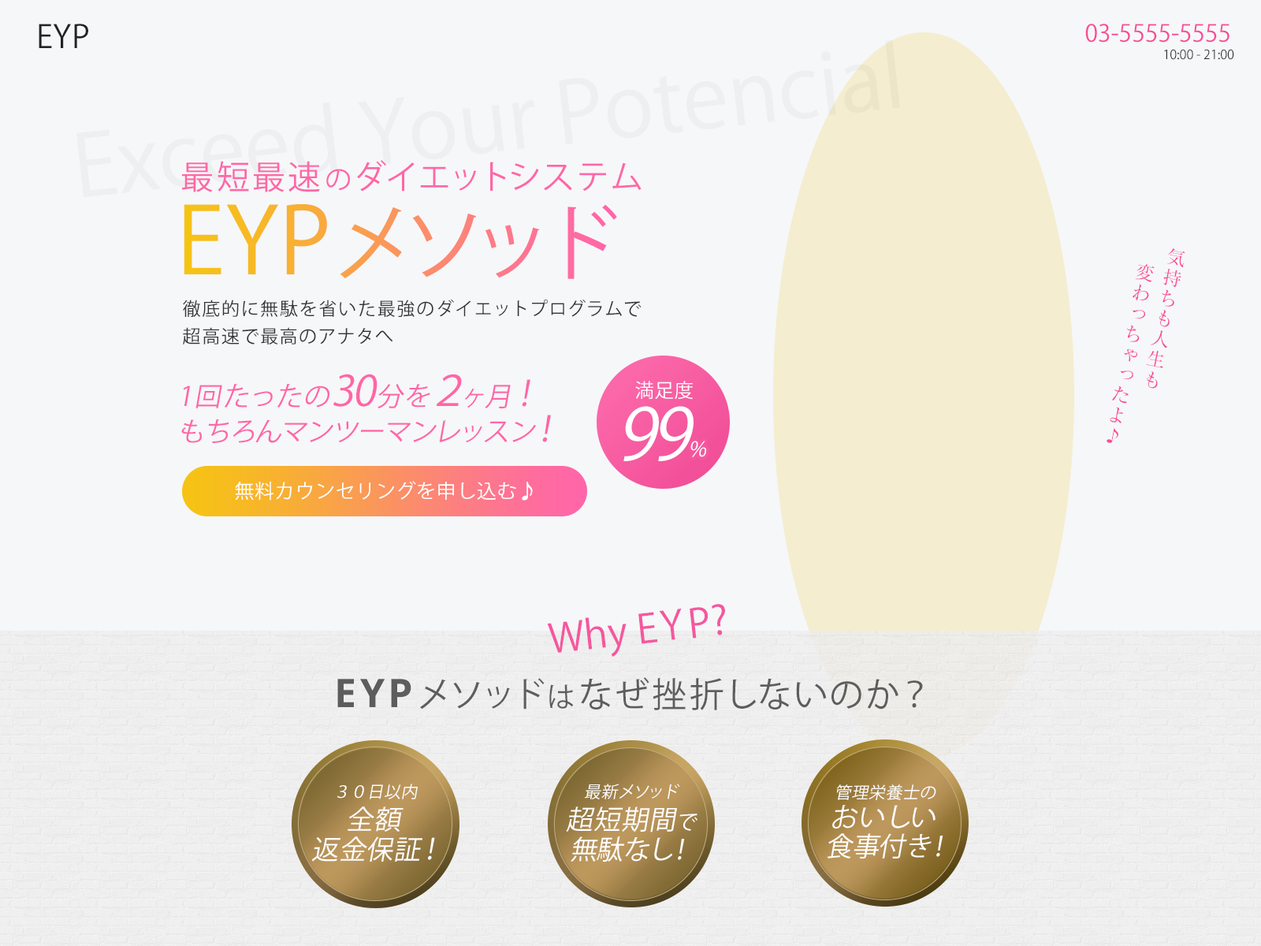
<style>
.page{position:relative;width:1261px;height:946px;background:#f6f7f9}
.page>*{position:absolute;margin:0}
.t1{font:31.5px "KozGoPr6N-Regular";letter-spacing:0.01em;color:#232323}
.t2{font:23.6px "KozGoPr6N-Regular";color:#f74d95}
.t3{font:84.3px "KozGoPr6N-Regular";color:#eeeff1}
.t4{font:12.6px "KozGoPr6N-Regular";color:#333333}
.t5{font:33.1px "KozGoPr6N-Regular";letter-spacing:0.1em;color:#ff66a7}
.t6{font:27px "KozGoPr6N-Regular";letter-spacing:0.1em;color:#ff66a7}
.t7{font:82.7px "KozGoPr6N-Regular";letter-spacing:0.01em}
.t8{font:91.4px "KozGoPr6N-Regular";letter-spacing:0.01em}
.t9{font:18.9px/27.7px "MatisseProN-M";letter-spacing:0.1em;color:#f74d95}
.t10{font:18.1px/27.6px "KozGoPr6N-Regular";letter-spacing:0.075em;color:#333333}
.t11{font:26.8px/35.6px "KozGoPr6N-Regular";letter-spacing:0.01em;color:#ff66a7;font-style:italic}
.t12{font:26.8px/35.6px "KozGoPr6N-Regular";letter-spacing:0.05em;color:#ff66a7;font-style:italic}
.t13{font:41.7px/35.6px "KozGoPr6N-Regular";letter-spacing:0.05em;color:#ff66a7;font-style:italic}
.t14{font:34.7px/35.6px "KozGoPr6N-Regular";letter-spacing:0.05em;color:#ff66a7;font-style:italic}
.t15{font:19.2px "KozGoPr6N-Regular";letter-spacing:0.025em;color:#ffffff}
.t16{font:70.8px "KozGoPr6N-Regular";letter-spacing:0.025em;color:#ffffff;font-style:italic}
.t17{font:20.6px "KozGoPr6N-Regular";letter-spacing:0.025em;color:#ffffff;font-style:italic}
.t18{font:19.7px "KozGoPr6N-Regular";letter-spacing:0.025em;color:#ffffff}
.t19{font:19.7px "KozGoPr6N-Regular";letter-spacing:0.025em;color:#ffffff;font-weight:bold}
.t20{font:39.4px "KozGoPr6N-Regular";color:#f5579e}
.t21{font:34.4px "KozGoPr6N-Regular";letter-spacing:0.1em;color:#5d5d5d}
.t22{font:39.4px "OpenSans-Bold";letter-spacing:0.1em;color:#5d5d5d}
.t23{font:34.5px "KozGoPr6N-Regular";letter-spacing:0.1em;color:#5d5d5d}
.t24{font:28.2px "KozGoPr6N-Regular";letter-spacing:0.1em;color:#5d5d5d}
.t25{font:16.5px "KozGoPr6N-Regular";letter-spacing:0.025em;color:#fefefe;font-style:italic}
.t26{font:26.8px/29.6px "KozGoPr6N-Regular";letter-spacing:0.025em;color:#fefefe;font-style:italic}
.t27{font:28.3px/29.6px "KozGoPr6N-Regular";letter-spacing:0.025em;color:#fefefe;font-style:italic}
.t28{font:26.8px/29.5px "KozGoPr6N-Regular";letter-spacing:0.025em;color:#fefefe;font-style:italic}
.t29{font:20.5px/29.5px "KozGoPr6N-Regular";letter-spacing:0.025em;color:#fefefe;font-style:italic}
</style>
<div class="page">
<p class="t1" style="left:39px;top:24px;width:49px;height:24px">EYP</p>
<p class="t2" style="left:1085px;top:24px;width:144px;height:19px">03-5555-5555</p>
<p class="t3" style="left:76px;top:39px;width:824px;height:159px;rotate:-6deg">Exceed Your Potencial</p>
<p class="t4" style="left:1164px;top:49px;width:70px;height:11px">10:00 - 21:00</p>
<p class="t5" style="left:181px;top:160px;width:460px;height:32px">最短最速<span class="t6">の</span>ダイエットシステム</p>
<p class="t7" style="left:184px;top:204px;width:433px;height:75px"><span class="t8">EYP </span>メソッド</p>
<p class="t9" style="left:1106px;top:248px;width:79px;height:195px;rotate:11deg">気持ちも人生も<br>　変わっちゃったよ♪</p>
<p class="t10" style="left:183px;top:299px;width:458px;height:45px">徹底的に無駄を省いた最強のダイエットプログラムで<br>超高速で最高のアナタへ</p>
<p class="t11" style="left:181px;top:374px;width:370px;height:69px"><span class="t12">1回たったの</span><span class="t13">30</span><span class="t12">分を</span><span class="t13">2</span><span class="t12">ヶ月</span><span class="t14">！<br></span>もちろんマンツーマンレッスン<span class="t14">！</span></p>
<p class="t15" style="left:635px;top:381px;width:58px;height:19px">満足度</p>
<p class="t16" style="left:623px;top:406px;width:71px;height:55px">99</p>
<p class="t17" style="left:690px;top:441px;width:17px;height:16px">%</p>
<p class="t18" style="left:235px;top:481px;width:298px;height:19px">無料カウンセリングを申し込む<span class="t19">♪</span></p>
<p class="t20" style="left:547px;top:604px;width:178px;height:52px;rotate:-6deg">Why EYP?</p>
<p class="t21" style="left:337px;top:677px;width:586px;height:33px"><span class="t22">EYP </span><span class="t23">メソッド</span><span class="t24">は</span>なぜ挫折しないのか？</p>
<p class="t25" style="left:337px;top:783px;width:81px;height:16px">３０日以内</p>
<p class="t25" style="left:585px;top:783px;width:95px;height:16px">最新メソッド</p>
<p class="t25" style="left:836px;top:784px;width:100px;height:16px">管理栄養士の</p>
<p class="t26" style="left:312px;top:806px;width:123px;height:55px;text-align:center">全額<br>返金保証<span class="t27">！</span></p>
<p class="t28" style="left:566px;top:806px;width:131px;height:55px;text-align:center">超短期間<span class="t29">で<br></span>無駄なし！</p>
<p class="t28" style="left:827px;top:805px;width:116px;height:53px;text-align:center">おいしい<br>食事付き！</p>
</div>
